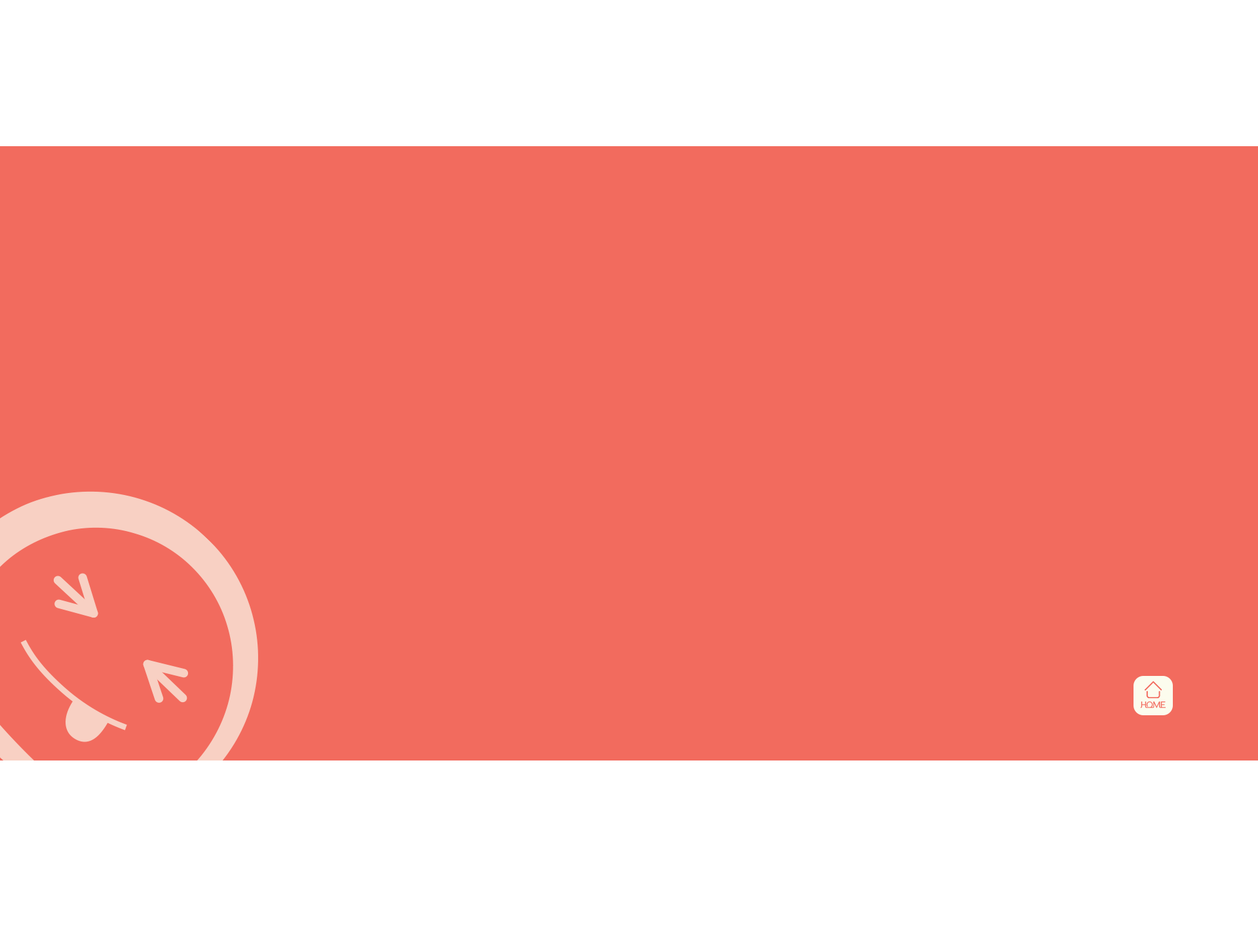
<style>
.page{position:relative;width:1258px;height:948px;background:#f26b5e}
.page>*{position:absolute;margin:0}
.t1{font:10.5px "Yeongdo-Rg";letter-spacing:-0.04em;color:#f26b5e;text-transform:uppercase}
</style>
<div class="page">
<p class="t1" style="left:1140px;top:701px;width:26px;height:7px">home</p>
</div>
